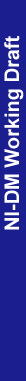
<style>
.page{position:relative;width:26px;height:381px;background:#1b1e8e}
.page>*{position:absolute;margin:0}
.t1{font:20px "Arial-BoldMT";color:#ffffff}
</style>
<div class="page">
<p class="t1" style="left:4px;top:36px;width:20px;height:194px;rotate:-90deg">NI-DM Working Draft</p>
</div>
